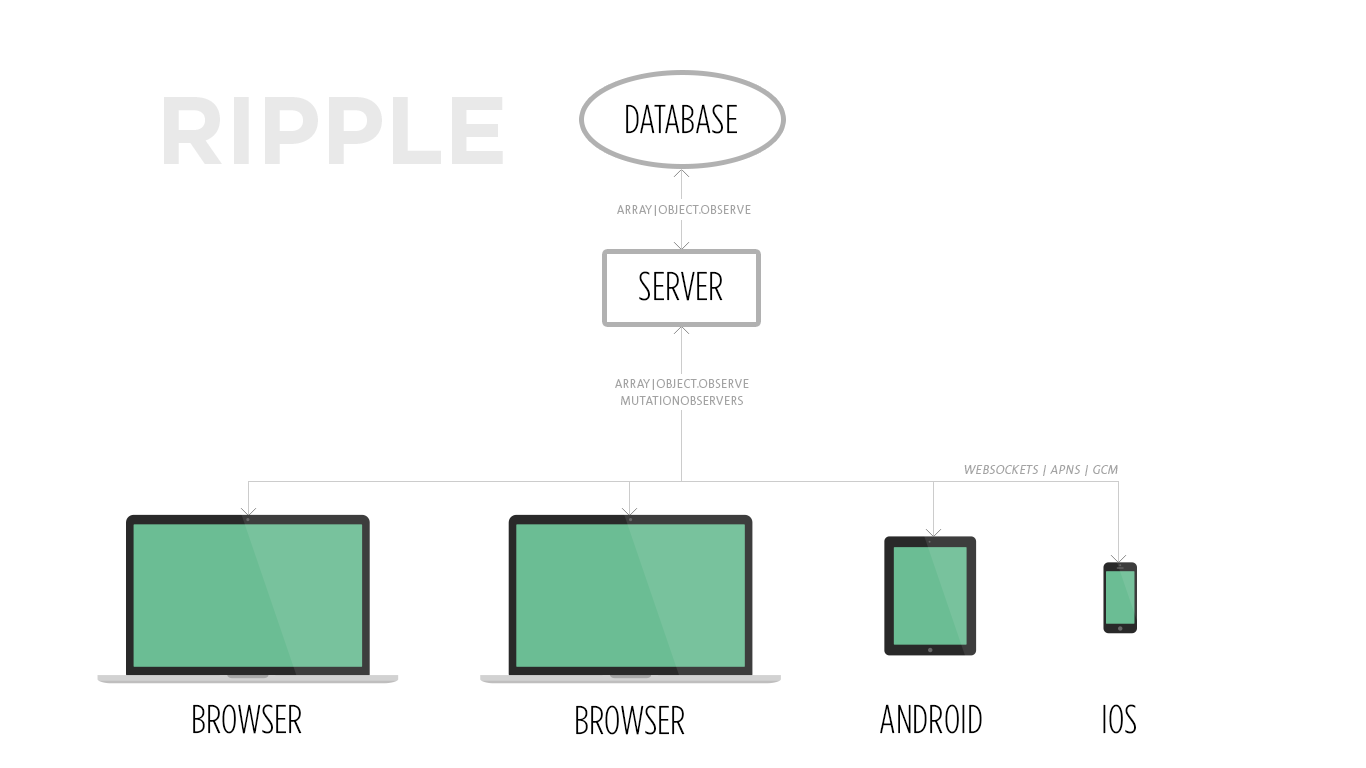
<style>
.page{position:relative;width:1366px;height:768px;background:#ffffff}
.page>*{position:absolute;margin:0}
.t1{font:95.7px "GothamBold";color:#e9e9e9;text-transform:uppercase}
.t2{font:40px "GothamCondensed-Light";color:#000000;text-transform:uppercase}
.t3{font:11.7px "CorpidCaps-Light";color:#a3a3a3;text-transform:uppercase}
.t4{font:11.7px/16.7px "CorpidCaps-Light";color:#a3a3a3;text-transform:uppercase}
.t5{font:11.7px "CorpidCaps-Light";color:#a3a3a3;text-transform:uppercase;font-style:italic}
</style>
<div class="page">
<p class="t1" style="left:164px;top:97px;width:339px;height:67px">Ripple</p>
<p class="t2" style="left:626px;top:104px;width:111px;height:30px">Database</p>
<p class="t3" style="left:617px;top:205px;width:134px;height:11px">array|Object.observe</p>
<p class="t2" style="left:639px;top:271px;width:84px;height:30px">Server</p>
<p class="t4" style="left:615px;top:379px;width:134px;height:26px;text-align:center">Array|Object.observe<br>mutationobservers</p>
<p class="t5" style="left:964px;top:465px;width:154px;height:11px">WEBSOCKETs | APNS | GCM</p>
<p class="t2" style="left:193px;top:704px;width:109px;height:30px">Browser</p>
<p class="t2" style="left:576px;top:705px;width:109px;height:30px">Browser</p>
<p class="t2" style="left:880px;top:704px;width:102px;height:30px">Android</p>
<p class="t2" style="left:1103px;top:704px;width:33px;height:30px">iOS</p>
</div>
